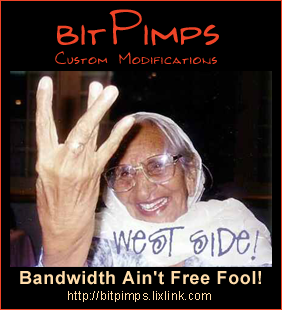
<style>
.page{position:relative;width:282px;height:310px;background:#000000}
.page>*{position:absolute;margin:0}
.t1{font:52px "Kilroy-WasHere";color:#ef4427}
.t2{font:18px "Kilroy-WasHere";letter-spacing:0.035em;color:#ef4427}
.t3{font:18px "Arial-BoldMT";letter-spacing:0.035em;color:#ffddab}
.t4{font:12px "ArialMT";letter-spacing:0.035em;color:#ffddab}
</style>
<div class="page">
<p class="t1" style="left:57px;top:9px;width:162px;height:37px">bitPimps</p>
<p class="t2" style="left:55px;top:51px;width:162px;height:14px">Custom Modifications</p>
<p class="t3" style="left:20px;top:271px;width:241px;height:14px">Bandwidth Ain't Free Fool!</p>
<p class="t4" style="left:68px;top:291px;width:143px;height:11px">http://bitpimps.lixlink.com</p>
</div>
